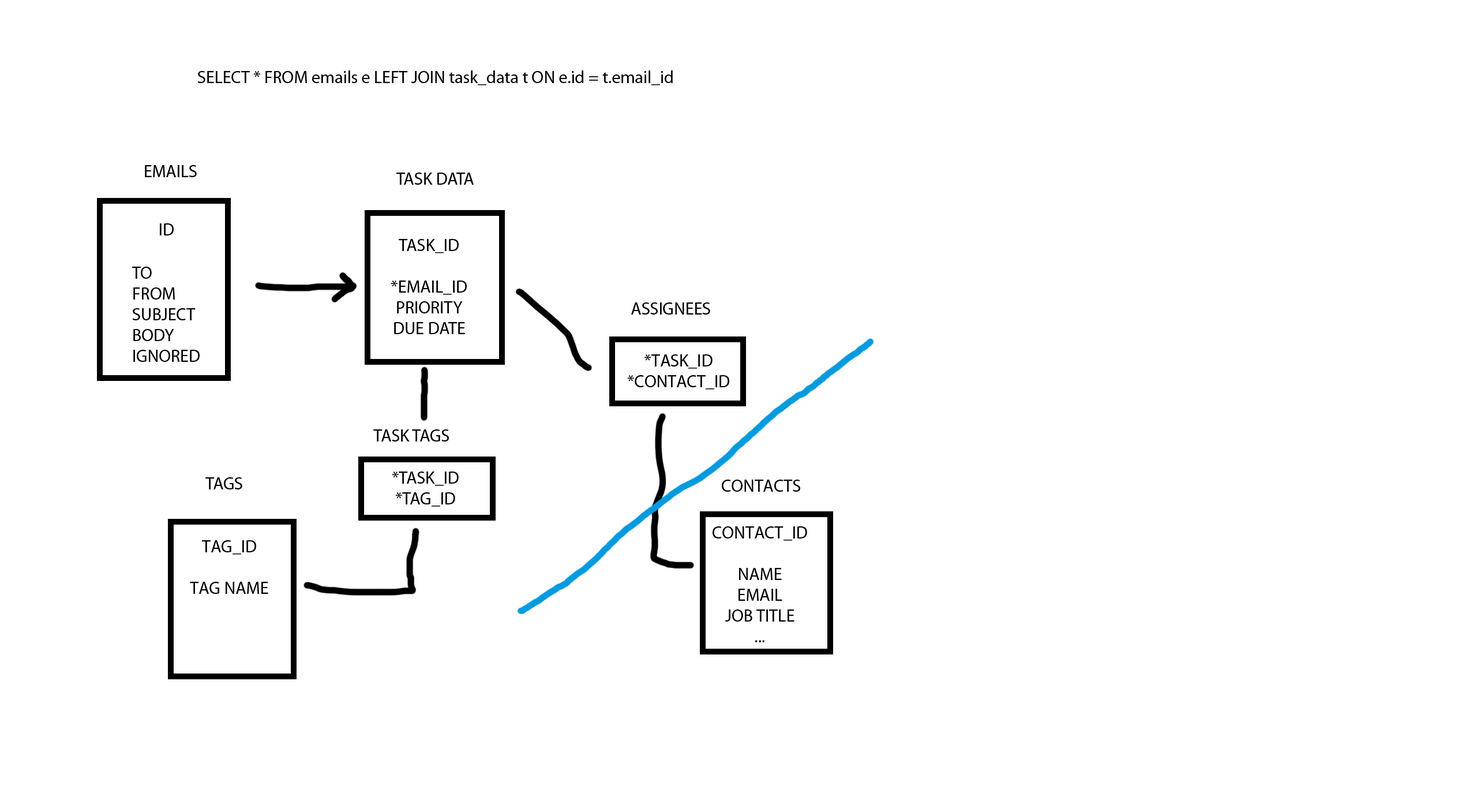
<style>
.page{position:relative;width:1477px;height:808px;background:#ffffff}
.page>*{position:absolute;margin:0}
.t1{font:17.3px "MyriadPro-Regular";color:#000000}
</style>
<div class="page">
<p class="t1" style="left:197px;top:70px;width:476px;height:15px">SELECT * FROM emails e LEFT JOIN task_data t ON e.id = t.email_id</p>
<p class="t1" style="left:145px;top:165px;width:52px;height:12px">EMAILS</p>
<p class="t1" style="left:396px;top:172px;width:78px;height:13px">TASK DATA</p>
<p class="t1" style="left:160px;top:223px;width:14px;height:12px">ID</p>
<p class="t1" style="left:391px;top:239px;width:76px;height:95px;text-align:center">TASK_ID<br><br>*EMAIL_ID<br>PRIORITY<br>DUE DATE</p>
<p class="t1" style="left:132px;top:266px;width:68px;height:96px">TO<br>FROM<br>SUBJECT<br>BODY<br>IGNORED</p>
<p class="t1" style="left:631px;top:302px;width:79px;height:12px">ASSIGNEES</p>
<p class="t1" style="left:628px;top:354px;width:101px;height:35px;text-align:center">*TASK_ID<br>*CONTACT_ID</p>
<p class="t1" style="left:373px;top:429px;width:76px;height:12px">TASK TAGS</p>
<p class="t1" style="left:392px;top:471px;width:67px;height:35px;text-align:center">*TASK_ID<br>*TAG_ID</p>
<p class="t1" style="left:205px;top:477px;width:37px;height:12px">TAGS</p>
<p class="t1" style="left:722px;top:479px;width:78px;height:12px">CONTACTS</p>
<p class="t1" style="left:712px;top:526px;width:95px;height:116px;text-align:center">CONTACT_ID<br><br>NAME<br>EMAIL<br>JOB TITLE<br>...</p>
<p class="t1" style="left:190px;top:540px;width:78px;height:54px;text-align:center">TAG_ID<br><br>TAG NAME</p>
</div>
